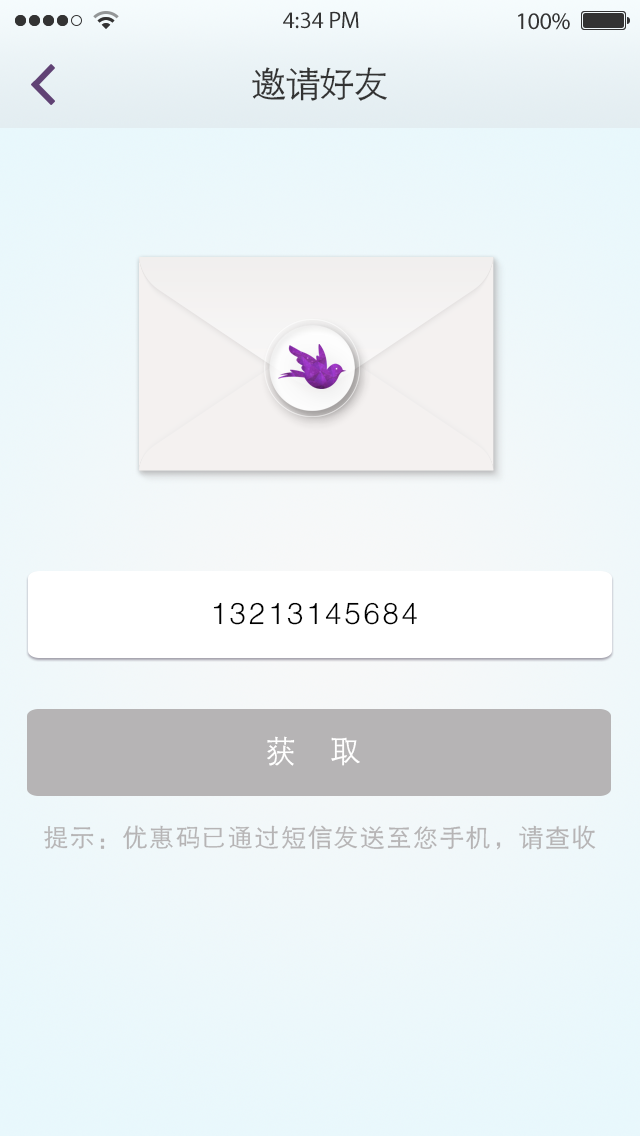
<style>
.page{position:relative;width:640px;height:1136px}
.page>*{position:absolute;margin:0}
.t1{font:24px "MyriadPro-Regular";color:#333333}
.t2{font:34px "FZZDXJW--GB1-0";color:#333333}
.t3{font:30px "FZZDXJW--GB1-0";letter-spacing:0.1em;color:#000000}
.t4{font:30px "FZZDXJW--GB1-0";letter-spacing:0.1em;color:#ffffff}
.t5{font:24px "FZZDXJW--GB1-0";letter-spacing:0.1em;color:#b6b4b5}
</style>
<div class="page">
<p class="t1" style="left:283px;top:11px;width:76px;height:18px">4:34 PM</p>
<p class="t1" style="left:518px;top:13px;width:52px;height:17px">100%</p>
<p class="t2" style="left:252px;top:67px;width:135px;height:34px">邀请好友</p>
<p class="t3" style="left:213px;top:602px;width:204px;height:23px">13213145684</p>
<p class="t4" style="left:267px;top:736px;width:93px;height:30px">获   取</p>
<p class="t5" style="left:44px;top:825px;width:552px;height:25px">提示：优惠码已通过短信发送至您手机，请查收</p>
</div>
